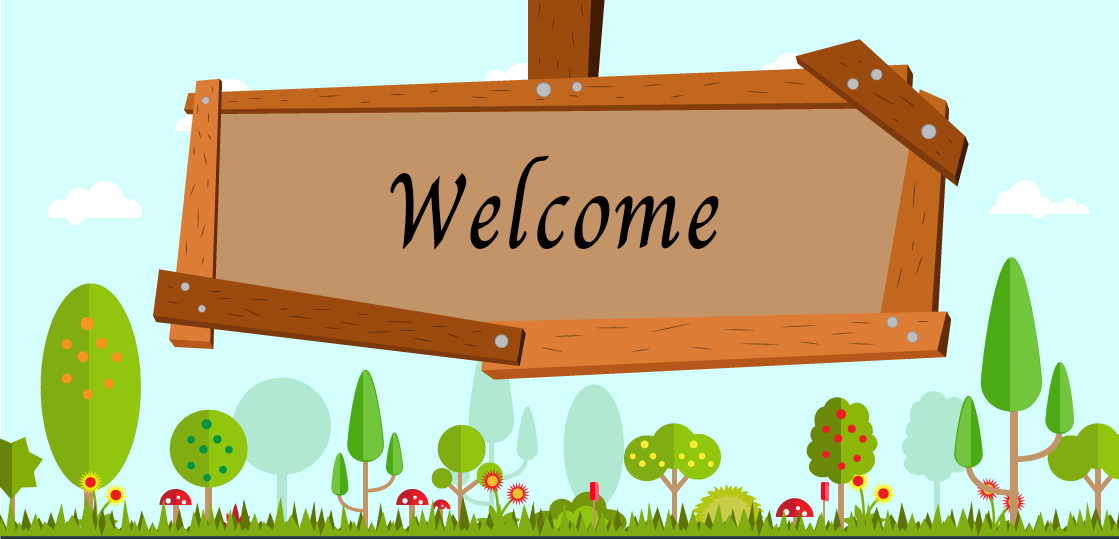
<style>
.page{position:relative;width:1119px;height:539px;background:#d5fffe}
.page>*{position:absolute;margin:0}
.t1{font:150px "THCharmofAU";color:#000000}
</style>
<div class="page">
<p class="t1" style="left:390px;top:155px;width:329px;height:95px">Welcome</p>
</div>
